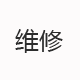
<style>
.page{position:relative;width:80px;height:80px;background:#fdfbfb}
.page>*{position:absolute;margin:0}
.t1{font:24px "MicrosoftYaHei";color:#2c2c2c}
</style>
<div class="page">
<p class="t1" style="left:15px;top:29px;width:48px;height:24px">维修</p>
</div>
